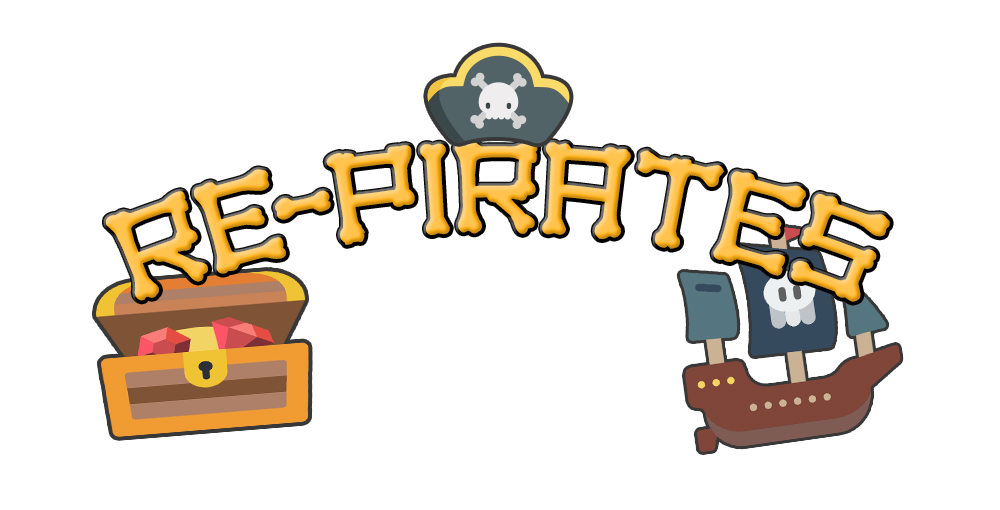
<style>
.page{position:relative;width:1000px;height:510px;background:#ffffff}
.page>*{position:absolute;margin:0}
.t1{font:130px "xBONESBold";letter-spacing:-0.01em}
</style>
<div class="page">
<p class="t1" style="left:106px;top:142px;width:784px;height:160px">RE-PiRATES</p>
</div>
